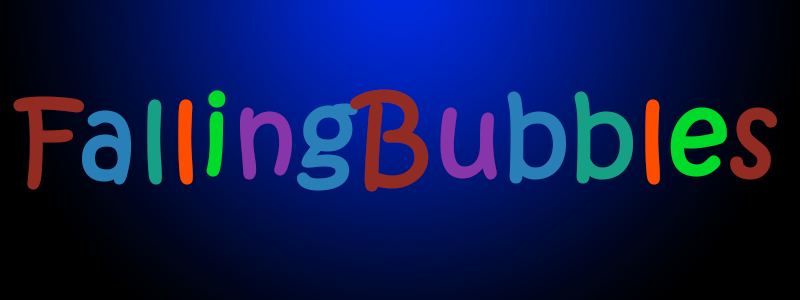
<style>
.page{position:relative;width:800px;height:300px}
.page>*{position:absolute;margin:0}
.t1{font:105px "KristenITC-Regular";color:#922b21;font-weight:bold}
.t2{font:105px "KristenITC-Regular";color:#2980b9;font-weight:bold}
.t3{font:105px "KristenITC-Regular";color:#16a085;font-weight:bold}
.t4{font:105px "KristenITC-Regular";color:#ff4d00;font-weight:bold}
.t5{font:105px "KristenITC-Regular";color:#00db2a;font-weight:bold}
.t6{font:105px "KristenITC-Regular";color:#8735a8;font-weight:bold}
</style>
<div class="page">
<p class="t1" style="left:13px;top:89px;width:764px;height:103px">F<span class="t2">a</span><span class="t3">l</span><span class="t4">l</span><span class="t5">i</span><span class="t6">n</span><span class="t2">g</span>B<span class="t6">u</span><span class="t2">b</span><span class="t3">b</span><span class="t4">l</span><span class="t5">e</span>s</p>
</div>
